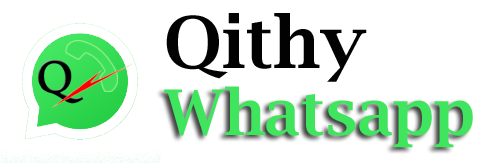
<style>
.page{position:relative;width:500px;height:163px;background:#ffffff}
.page>*{position:absolute;margin:0}
.t1{font:71.4px "LucidaBright-Demi";color:#020202}
.t2{font:63px "LucidaBright-Demi";color:#40e55e}
</style>
<div class="page">
<p class="t1" style="left:166px;top:13px;width:201px;height:69px">Qithy</p>
<p class="t2" style="left:164px;top:86px;width:309px;height:62px">Whatsapp</p>
</div>
